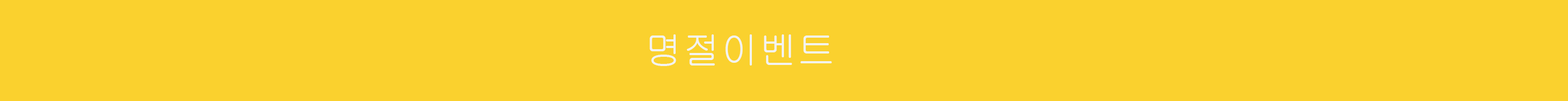
<style>
.page{position:relative;width:1568px;height:101px;background:#fad12e}
.page>*{position:absolute;margin:0}
.t1{font:38.1px "Gulim";color:#f3f3f3}
</style>
<div class="page">
<p class="t1" style="left:650px;top:34px;width:182px;height:32px">명절이벤트</p>
</div>
